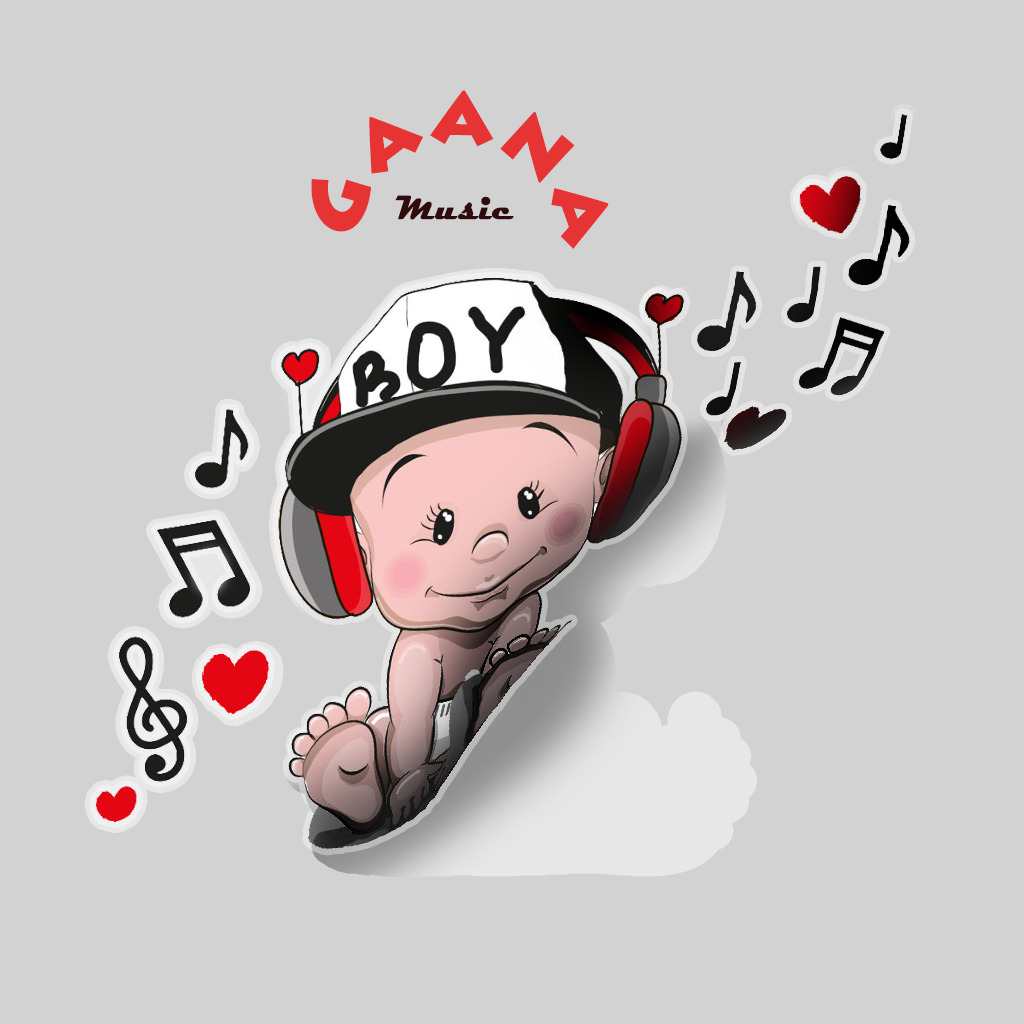
<style>
.page{position:relative;width:1024px;height:1024px;background:#d2d2d2}
.page>*{position:absolute;margin:0}
.t1{font:81.7px "LithosPro-Black";color:#e63333;font-weight:bold}
.t2{font:34px "Magneto-Bold";color:#310b0b;font-weight:bold}
</style>
<div class="page">
<p class="t1" style="left:311px;top:90px;width:298px;height:159px;rotate:-17deg">Gaana</p>
<p class="t2" style="left:395px;top:195px;width:119px;height:25px">Music</p>
</div>
